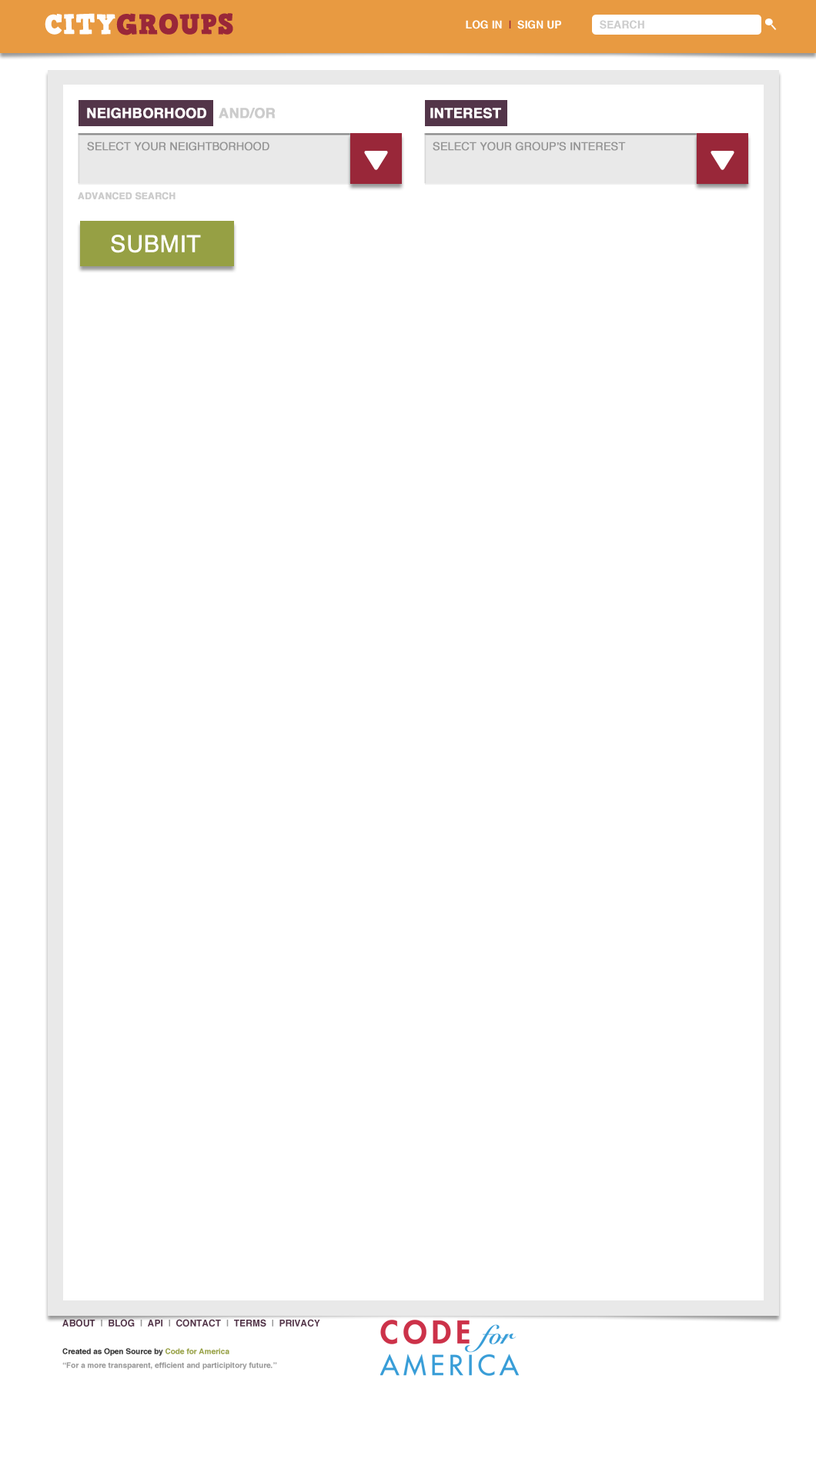
<style>
.page{position:relative;width:816px;height:1462px;background:#ffffff}
.page>*{position:absolute;margin:0}
.t1{font:27.7px "HVDComicSerifPro";color:#992739;text-transform:uppercase;font-weight:bold}
.t2{font:27.7px "HVDComicSerifPro";color:#fefefe;text-transform:uppercase;font-weight:bold}
.t3{font:10.8px "Helvetica-Bold";color:#ffffff;text-transform:uppercase}
.t4{font:10.8px "Helvetica-Bold";color:#992739;text-transform:uppercase}
.t5{font:10.8px "Helvetica-Bold";color:#cccccc;text-transform:uppercase}
.t6{font:13.9px "Helvetica-Bold";color:#ffffff;text-transform:uppercase;font-weight:bold}
.t7{font:13.9px "Helvetica-Bold";color:#cccccc;text-transform:uppercase;font-weight:bold}
.t8{font:10.8px "Helvetica";color:#959595;text-transform:uppercase;font-weight:bold}
.t9{font:9.2px "Helvetica-Bold";color:#cccccc;text-transform:uppercase;font-weight:bold}
.t10{font:23.1px "Helvetica";color:#ffffff;font-weight:bold}
.t11{font:7.7px/13.9px "Helvetica-Bold";color:#999999}
.t12{font:9.2px/13.9px "Helvetica-Bold";color:#533549;text-transform:uppercase}
.t13{font:9.2px/13.9px "Helvetica-Bold";color:#999999;text-transform:uppercase}
.t14{font:7.7px/13.9px "Helvetica-Bold";color:#333333}
.t15{font:7.7px/13.9px "Helvetica-Bold";color:#96a044}
</style>
<div class="page">
<p class="t1" style="left:45px;top:13px;width:188px;height:22px"><span class="t2">City</span>Groups</p>
<p class="t3" style="left:466px;top:20px;width:95px;height:9px">log in  <span class="t4">|</span>  SIGN up</p>
<p class="t5" style="left:599px;top:20px;width:45px;height:9px">search</p>
<p class="t6" style="left:87px;top:108px;width:119px;height:10px">neighborhood</p>
<p class="t7" style="left:219px;top:108px;width:56px;height:10px">and/or</p>
<p class="t6" style="left:430px;top:108px;width:71px;height:10px">interest</p>
<p class="t8" style="left:87px;top:142px;width:182px;height:9px">Select your neightborhood</p>
<p class="t8" style="left:432px;top:142px;width:194px;height:9px">select your group’s interest</p>
<p class="t9" style="left:78px;top:192px;width:97px;height:8px">advanced search</p>
<p class="t10" style="left:111px;top:235px;width:90px;height:18px">SUBMIT</p>
<p class="t11" style="left:62px;top:1319px;width:258px;height:51px"><span class="t12">About  </span><span class="t13">|  </span><span class="t12">blog  </span><span class="t13">|  </span><span class="t12">api  </span><span class="t13">|  </span><span class="t12">Contact  </span><span class="t13">|  </span><span class="t12">terms  </span><span class="t13">|  </span><span class="t12">Privacy<br><br></span><span class="t14">Created as Open Source by </span><span class="t15">Code for America<br></span>“For a more transparent, efficient and participitory future.”</p>
</div>
